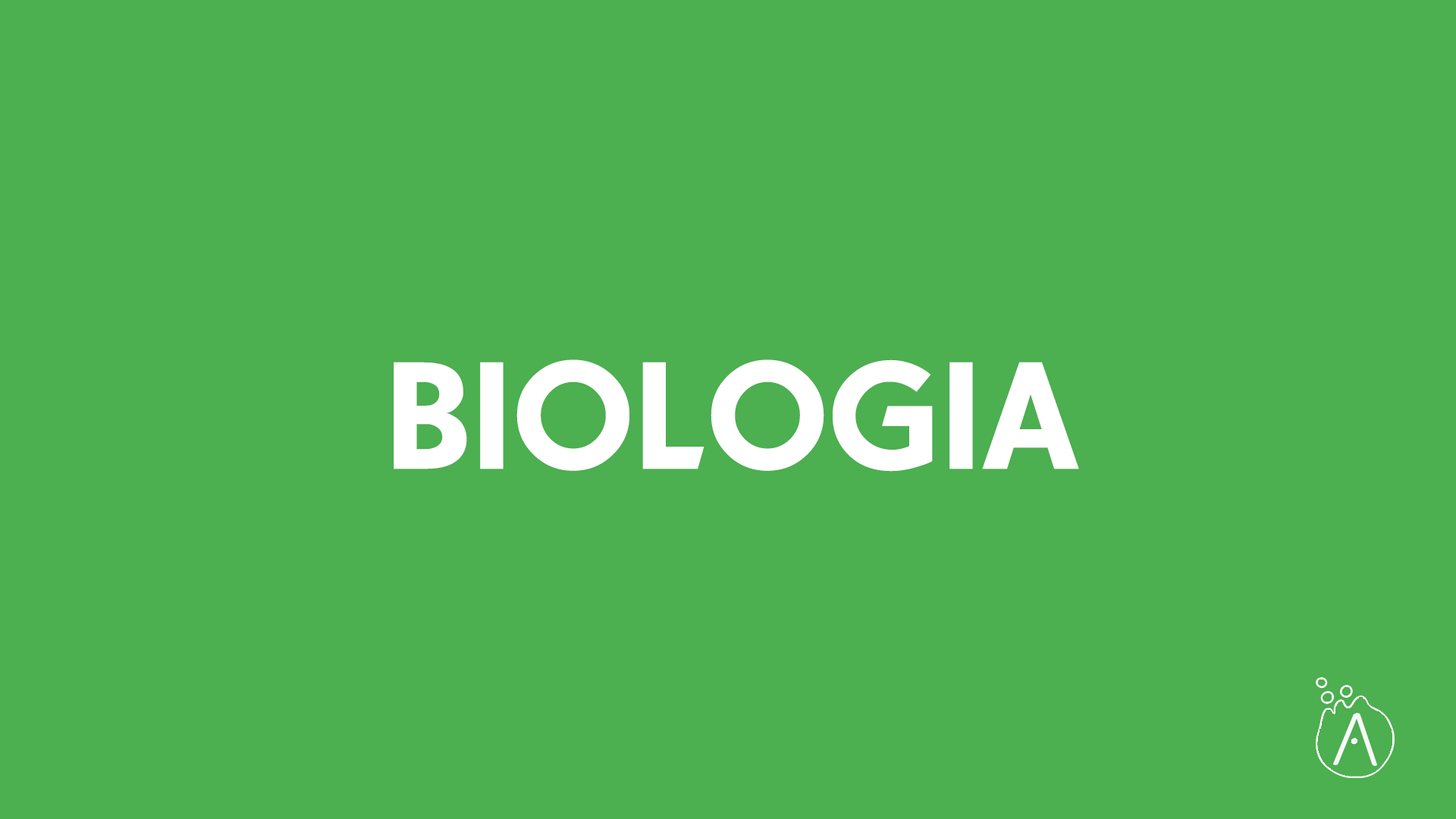
<style>
.page{position:relative;width:1456px;height:819px;background:#4caf50}
.page>*{position:absolute;margin:0}
.t1{font:151.7px "TheSimsSans-Bold";color:#ffffff}
</style>
<div class="page">
<p class="t1" style="left:394px;top:359px;width:685px;height:113px">BIOLOGIA</p>
</div>
